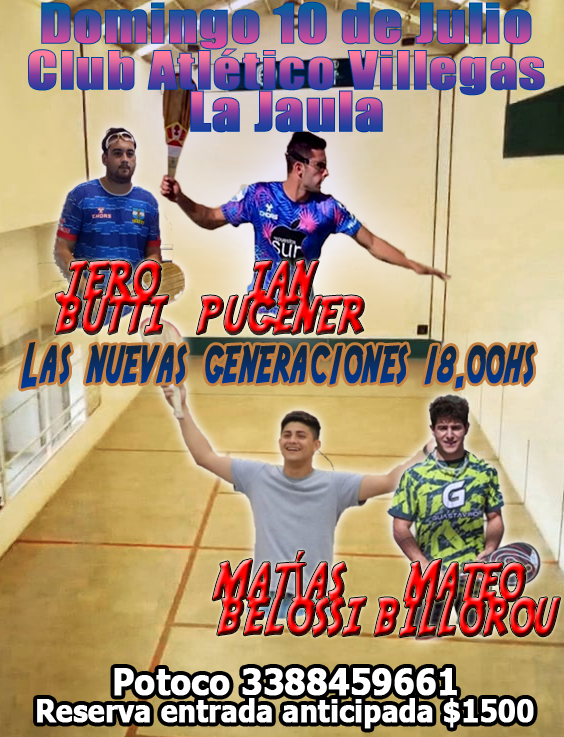
<style>
.page{position:relative;width:564px;height:737px}
.page>*{position:absolute;margin:0}
.t1{font:51.2px "Impact";font-weight:bold;scale:1.13 1}
.t2{font:49.4px "Impact";font-weight:bold;scale:1.13 1}
.t3{font:56.2px/34.8px "AdventureNormal";text-transform:uppercase;font-weight:bold;scale:0.73 1}
.t4{font:69.2px "AdventureNormal";font-weight:bold;scale:0.51 1}
.t5{font:54.8px/34.8px "AdventureNormal";text-transform:uppercase;font-weight:bold;scale:0.75 1}
.t6{font:54.8px/34.8px "TimesNewRomanPSMT";text-transform:uppercase;font-weight:bold;scale:0.75 1}
.t7{font:56.2px/34.8px "AdventureNormal";text-transform:uppercase;font-weight:bold;scale:0.69 1}
.t8{font:36.6px "Tahoma-Bold";color:#ffffff;font-weight:bold;scale:0.89 1}
.t9{font:30.8px "Tahoma-Bold";color:#ffffff;font-weight:bold;scale:0.89 1}
</style>
<div class="page">
<p class="t1" style="left:41px;top:1px;width:491px;height:49px">Domingo 10 de Julio</p>
<p class="t2" style="left:28px;top:48px;width:517px;height:48px">Club Atlético Villegas</p>
<p class="t1" style="left:190px;top:90px;width:193px;height:43px">La Jaula</p>
<p class="t3" style="left:55px;top:260px;width:114px;height:75px;text-align:center">Jero<br>Butti</p>
<p class="t3" style="left:197px;top:259px;width:167px;height:76px;text-align:center">Ian<br>Pugener</p>
<p class="t4" style="left:21px;top:342px;width:514px;height:47px">Las nuevas generaciones 18.00hs</p>
<p class="t5" style="left:212px;top:551px;width:155px;height:86px;text-align:center">Mat<span class="t6">í</span>as <br>Belossi</p>
<p class="t7" style="left:374px;top:559px;width:186px;height:78px;text-align:center">Mateo<br>Billorou</p>
<p class="t8" style="left:114px;top:668px;width:343px;height:28px">Potoco 3388459661</p>
<p class="t9" style="left:37px;top:698px;width:497px;height:31px">Reserva entrada anticipada $1500</p>
</div>
